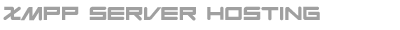
<style>
.page{position:relative;width:400px;height:30px;background:#ffffff}
.page>*{position:absolute;margin:0}
.t1{font:18px "CCDesignerGenesRegularFit";color:#a0a0a0}
</style>
<div class="page">
<p class="t1" style="left:3px;top:6px;width:317px;height:15px">XMPP SERVER HOSTING</p>
</div>
